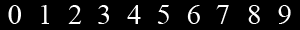
<style>
.page{position:relative;width:300px;height:30px;background:#000000}
.page>*{position:absolute;margin:0}
.t1{font:29.5px "TimesNewRomanPSMT";letter-spacing:0.08em;color:#ffffff}
</style>
<div class="page">
<p class="t1" style="left:8px;top:5px;width:13px;height:19px">0</p>
<p class="t1" style="left:41px;top:5px;width:8px;height:19px">1</p>
<p class="t1" style="left:68px;top:5px;width:14px;height:19px">2</p>
<p class="t1" style="left:98px;top:5px;width:11px;height:19px">3</p>
<p class="t1" style="left:127px;top:5px;width:14px;height:19px">4</p>
<p class="t1" style="left:157px;top:5px;width:12px;height:19px">5</p>
<p class="t1" style="left:187px;top:5px;width:13px;height:19px">6</p>
<p class="t1" style="left:216px;top:5px;width:13px;height:19px">7</p>
<p class="t1" style="left:248px;top:5px;width:12px;height:19px">8</p>
<p class="t1" style="left:278px;top:5px;width:13px;height:19px">9</p>
</div>
